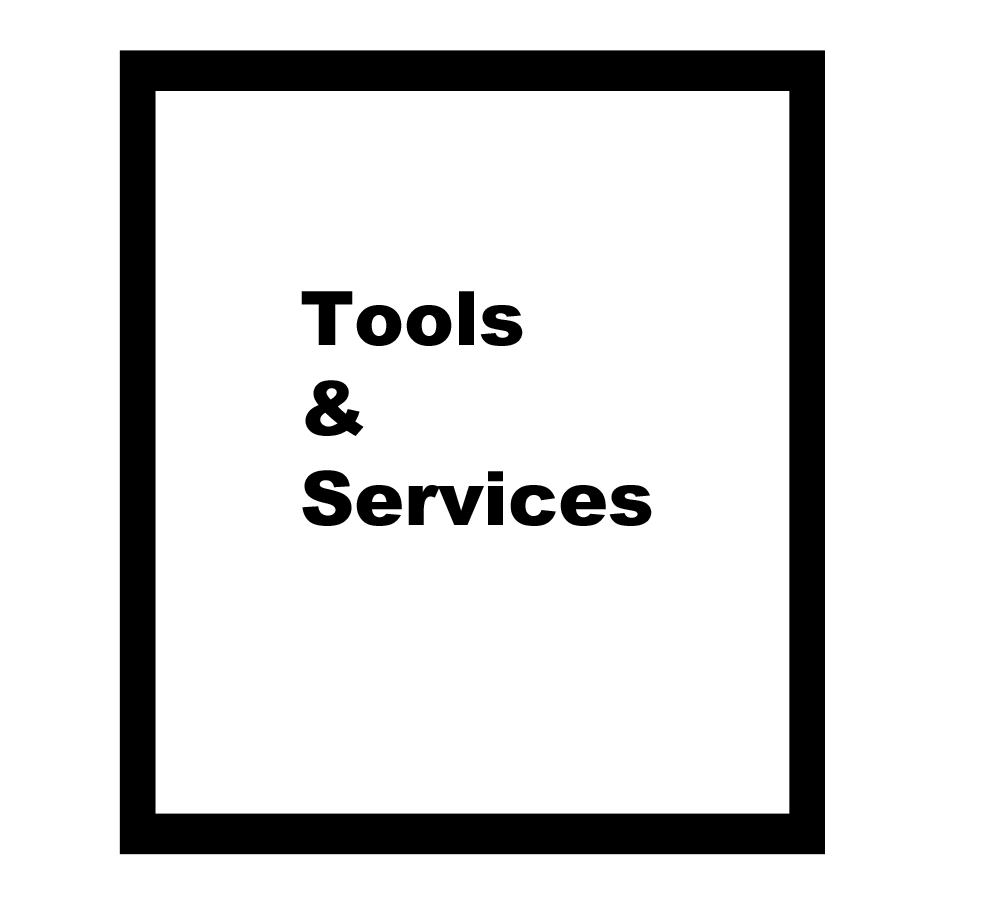
<style>
.page{position:relative;width:1008px;height:900px;background:#ffffff}
.page>*{position:absolute;margin:0}
.t1{font:75px "Arial-Black";color:#000000}
</style>
<div class="page">
<p class="t1" style="left:301px;top:291px;width:351px;height:235px">Tools<br>&amp;<br>Services</p>
</div>
